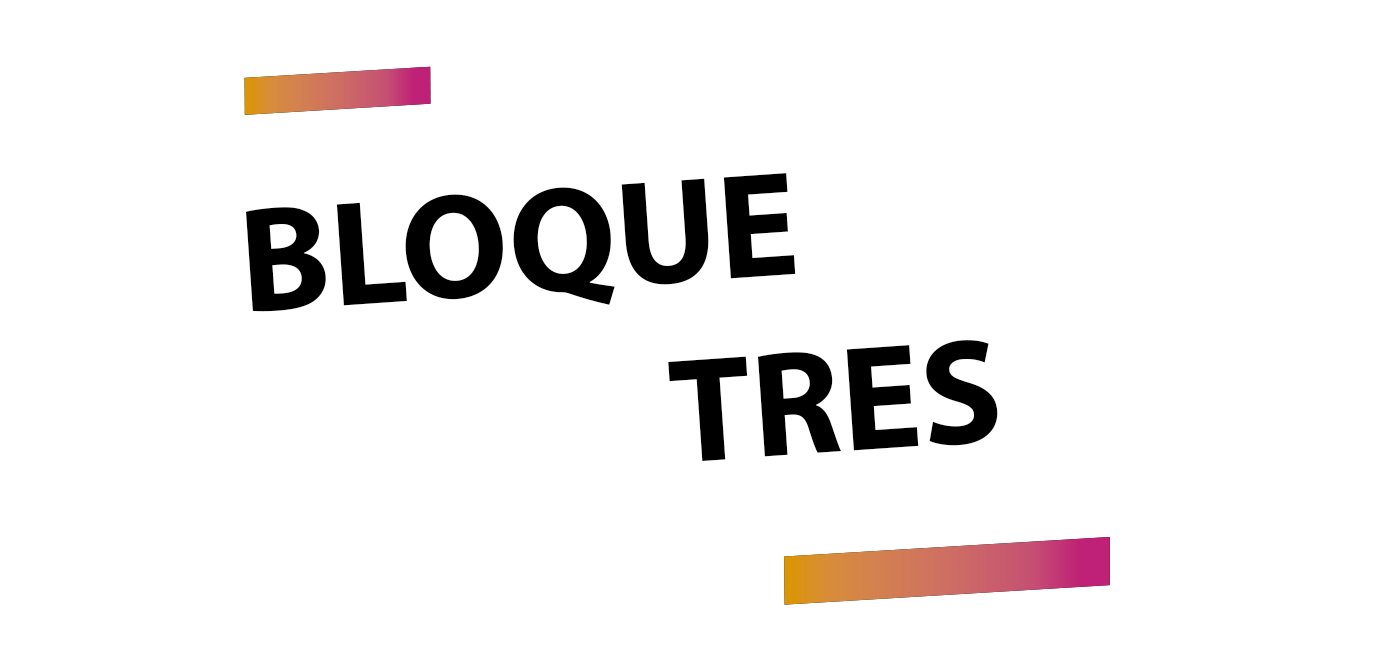
<style>
.page{position:relative;width:1380px;height:656px;background:#ffffff}
.page>*{position:absolute;margin:0}
.t1{font:150px "MyriadPro-Bold";color:#000000}
</style>
<div class="page">
<p class="t1" style="left:245px;top:173px;width:753px;height:288px;rotate:-4deg">BLOQUE<br>              TRES</p>
</div>
